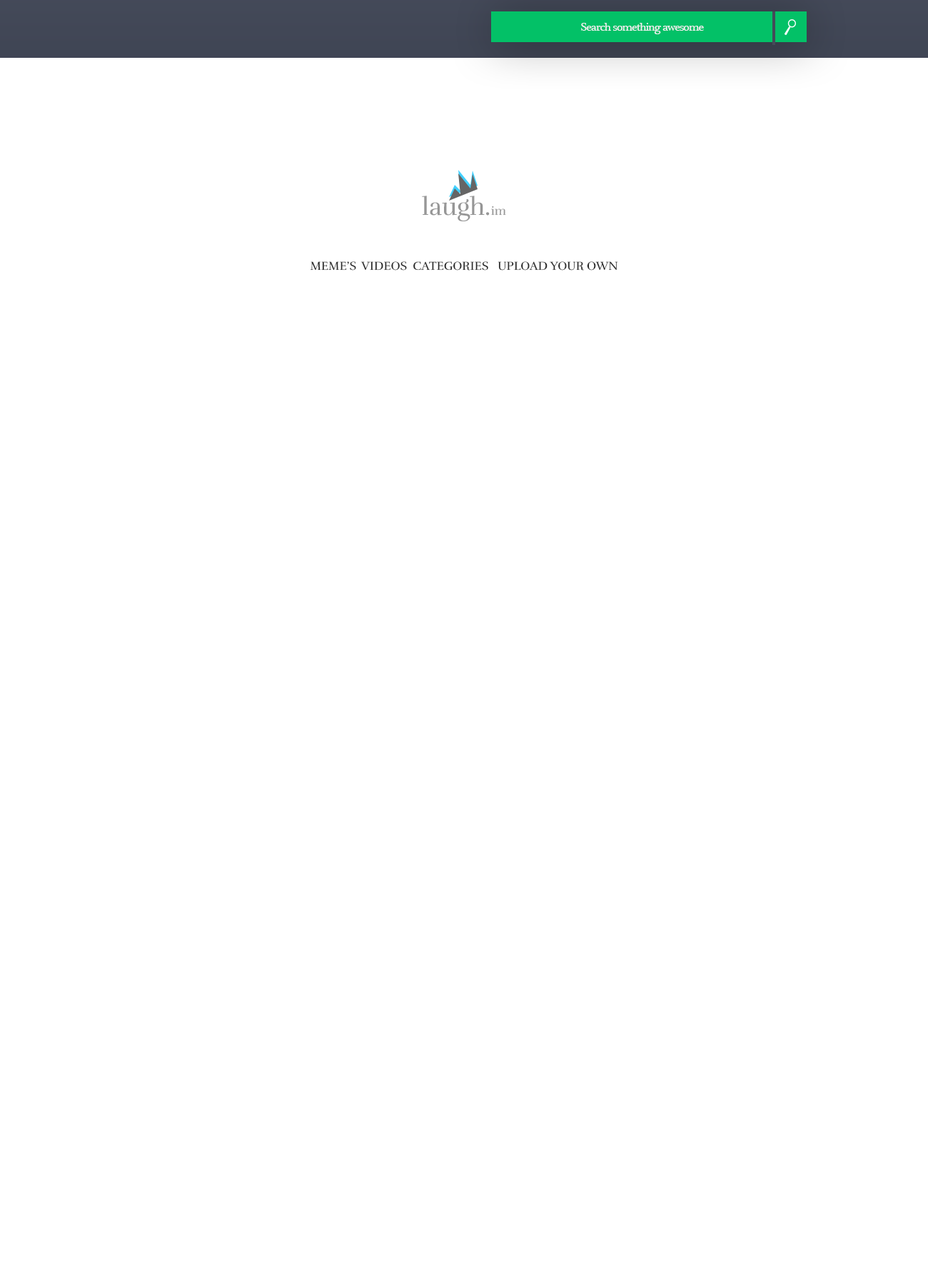
<style>
.page{position:relative;width:928px;height:1285px;background:#ffffff}
.page>*{position:absolute;margin:0}
.t1{font:11.4px "PlantagenetCherokee";letter-spacing:-0.06em;color:#eff0f3}
.t2{font:24.9px "Rufina-Regular";color:#969696}
.t3{font:12.1px "Rufina-Regular";color:#969696}
.t4{font:12px "Rufina-Regular";color:#282828;text-transform:uppercase}
</style>
<div class="page">
<p class="t1" style="left:581px;top:23px;width:123px;height:11px">Search something awesome</p>
<p class="t2" style="left:422px;top:196px;width:84px;height:25px">laugh.<span class="t3">im</span></p>
<p class="t4" style="left:311px;top:261px;width:306px;height:10px">Meme’s  Videos Categories   Upload Your own</p>
</div>
